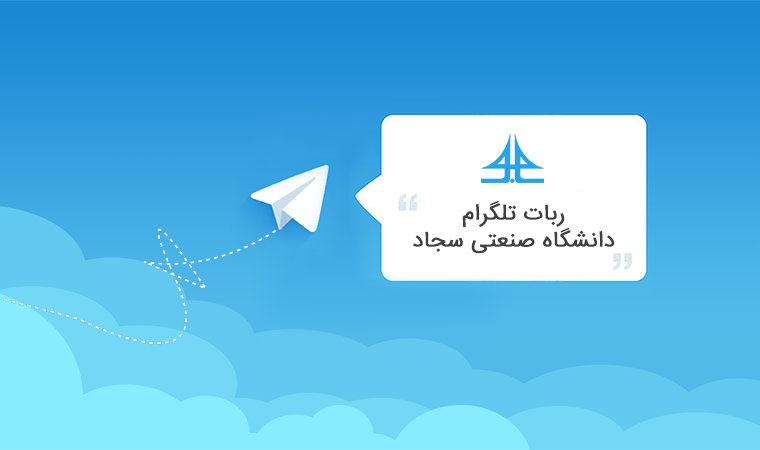
<style>
.page{position:relative;width:760px;height:450px}
.page>*{position:absolute;margin:0}
.t1{font:22.4px "IRANSansWeb";color:#414040;font-weight:bold}
</style>
<div class="page">
<p class="t1" style="left:413px;top:201px;width:202px;height:53px;text-align:center">ربات تلگرام<br>دانشگاه صنعتی سجاد</p>
</div>
